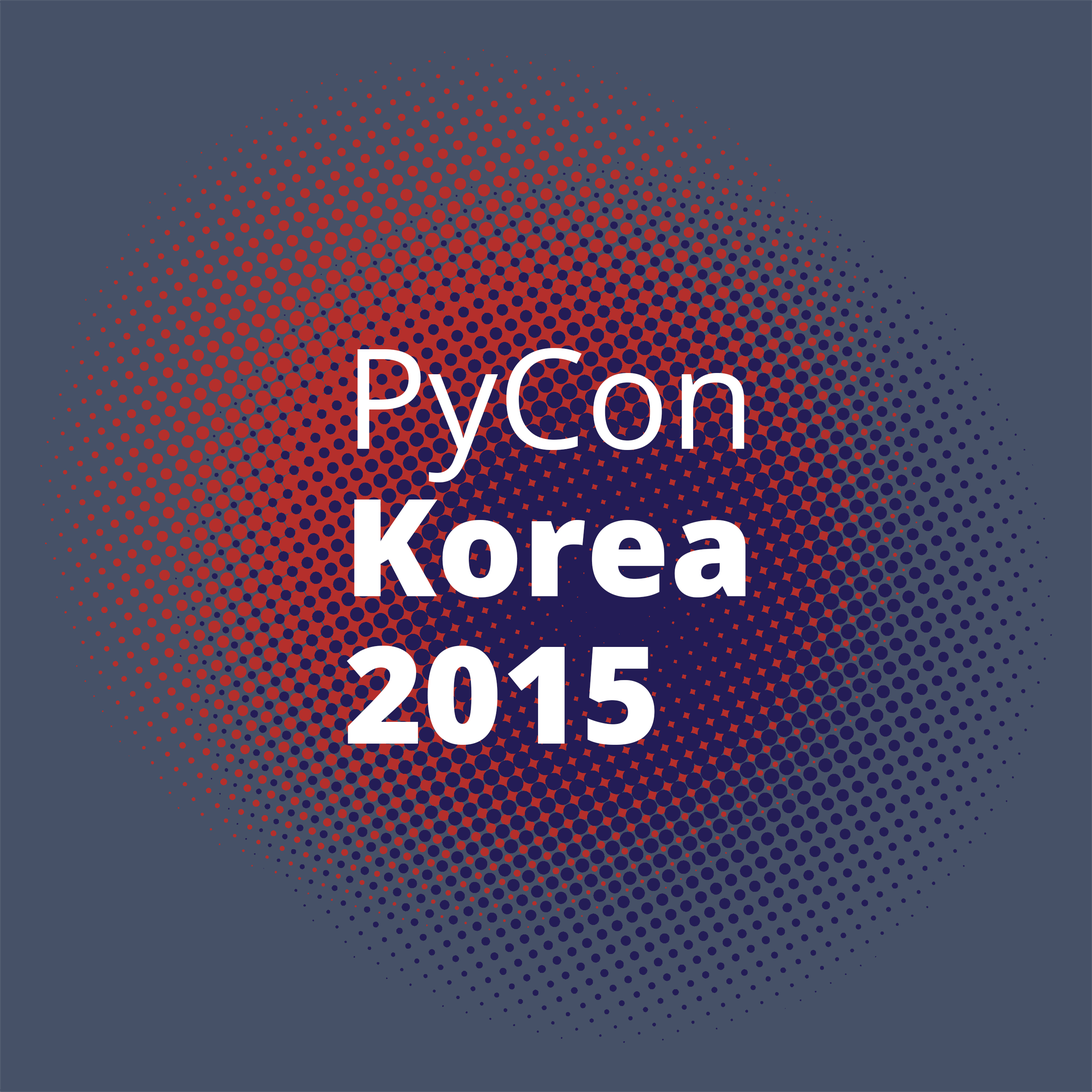
<style>
.page{position:relative;width:1092px;height:1092px;background:#465167}
.page>*{position:absolute;margin:0}
.t1{font:135.1px/147.4px "OpenSans-Extrabold";color:#ffffff}
.t2{font:139.2px/147.4px "OpenSans";color:#ffffff}
</style>
<div class="page">
<p class="t1" style="left:347px;top:348px;width:399px;height:397px"><span class="t2">PyCon<br></span>Korea<br>2015</p>
</div>
